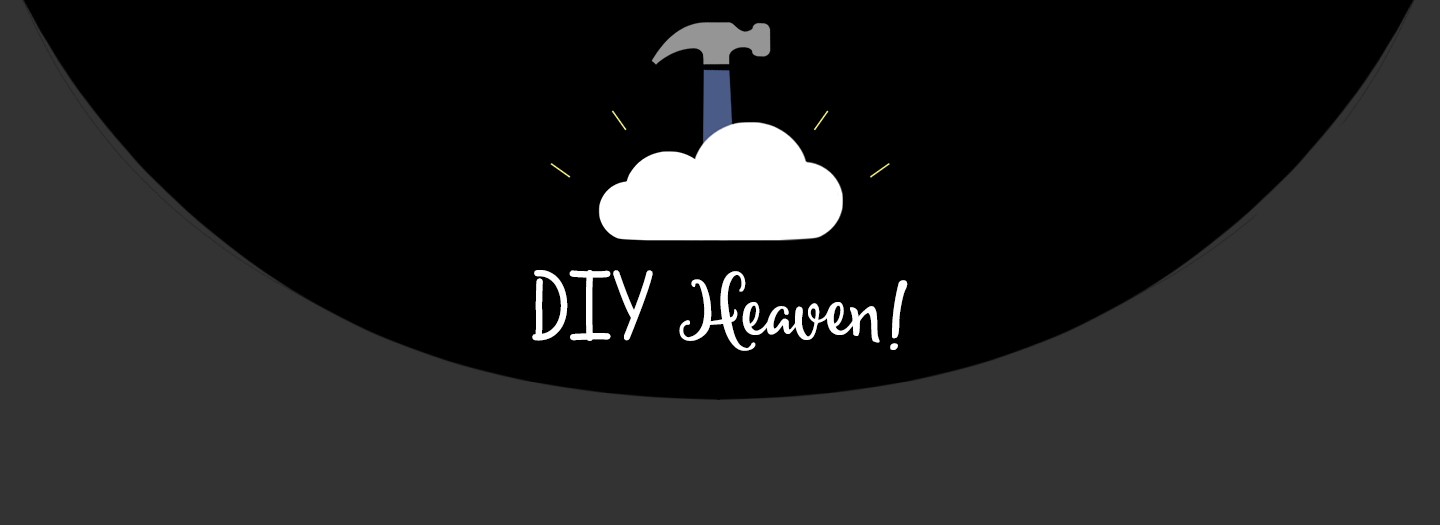
<style>
.page{position:relative;width:1440px;height:525px;background:#000000}
.page>*{position:absolute;margin:0}
.t1{font:100px "Michael";color:#ffffff}
.t2{font:100px "MfReallyAwesome";color:#ffffff}
</style>
<div class="page">
<p class="t1" style="left:532px;top:270px;width:376px;height:81px"><span class="t2">DIY </span>Heaven !</p>
</div>
